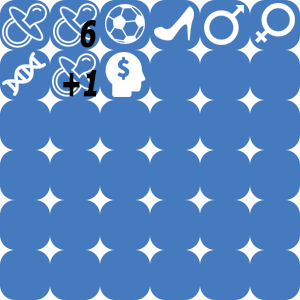
<style>
.page{position:relative;width:300px;height:300px;background:#457bbe}
.page>*{position:absolute;margin:0}
.t1{font:36px "Verdana-BoldItalic";letter-spacing:0.01em;color:#010101;font-weight:bold;scale:0.67 1}
</style>
<div class="page">
<p class="t1" style="left:80px;top:20px;width:16px;height:28px">6</p>
<p class="t1" style="left:63px;top:70px;width:34px;height:27px">+1</p>
</div>
